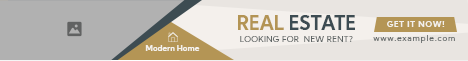
<style>
.page{position:relative;width:468px;height:61px;background:#b1b1b1}
.page>*{position:absolute;margin:0}
.t1{font:19px "KumbhSans-Bold";color:#3d4c52}
.t2{font:19px "KumbhSans-Bold";color:#b49555}
.t3{font:8px "KumbhSans-Bold";letter-spacing:0.097em;color:#f4f0ec}
.t4{font:8px "KumbhSans-Regular";letter-spacing:0.04em;color:#5f6565}
.t5{font:8px "KumbhSans-Regular";letter-spacing:0.1em;color:#5f6565}
.t6{font:8px "KumbhSans-Bold";color:#f4f0ec}
</style>
<div class="page">
<p class="t1" style="left:238px;top:15px;width:117px;height:15px"><span class="t2">REAL </span>ESTATE</p>
<p class="t3" style="left:387px;top:21px;width:58px;height:6px">GET IT NOW!</p>
<p class="t4" style="left:240px;top:36px;width:113px;height:6px">LOOKING FOR  NEW RENT?</p>
<p class="t5" style="left:373px;top:35px;width:82px;height:8px">www.example.com</p>
<p class="t6" style="left:145px;top:45px;width:55px;height:6px">Modern Home</p>
</div>
